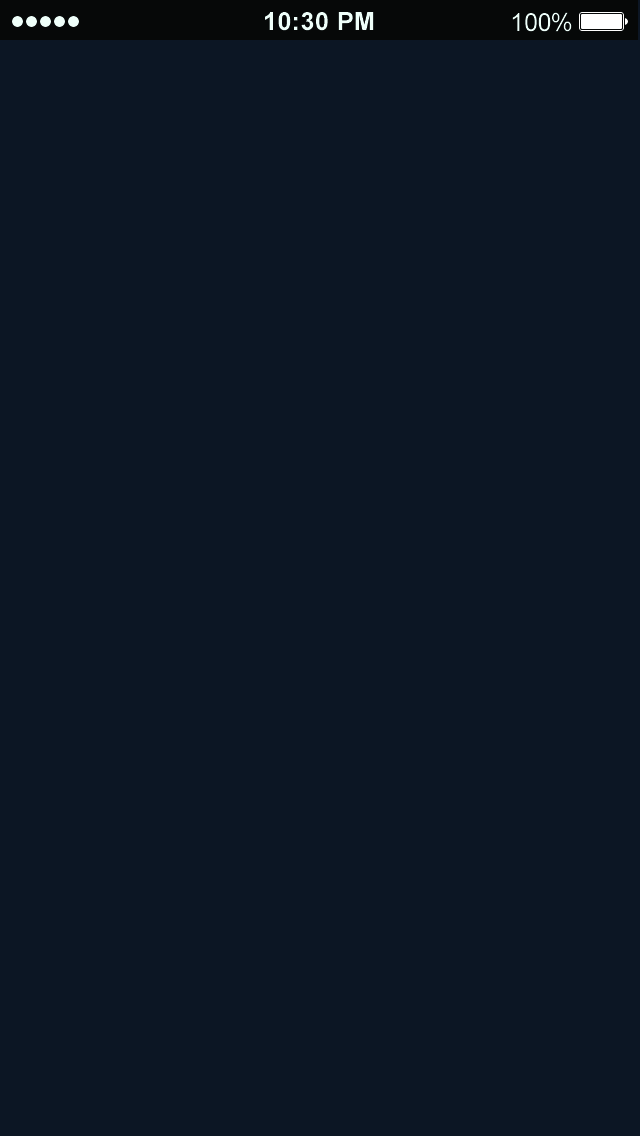
<style>
.page{position:relative;width:640px;height:1136px;background:#0c1624}
.page>*{position:absolute;margin:0}
.t1{font:25px "Arial-BoldMT";letter-spacing:0.02em;color:#effffa}
.t2{font:25px "ArialMT";color:#effffa}
</style>
<div class="page">
<p class="t1" style="left:265px;top:12px;width:109px;height:19px">10:30 PM</p>
<p class="t2" style="left:512px;top:12px;width:60px;height:20px">100%</p>
</div>
